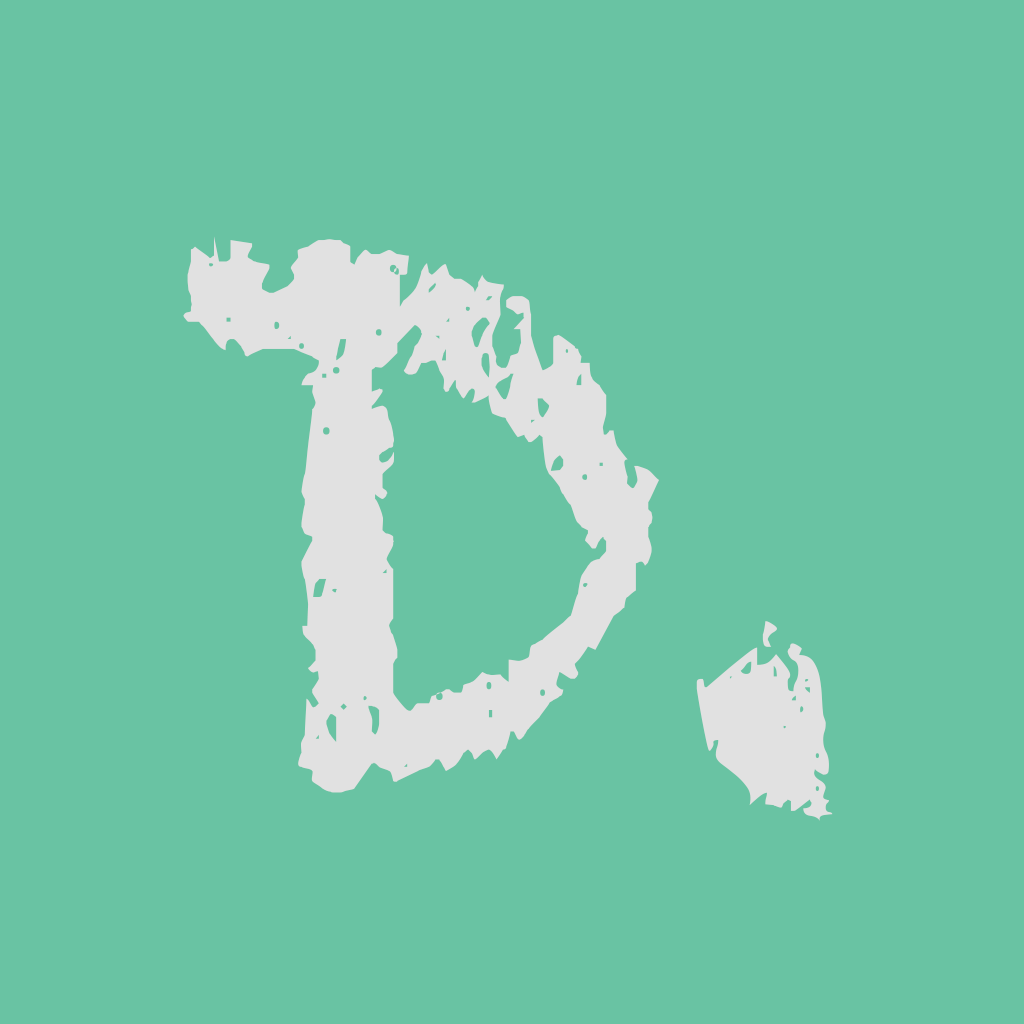
<style>
.page{position:relative;width:1024px;height:1024px;background:#69c3a3}
.page>*{position:absolute;margin:0}
.t1{font:746px "Chalkduster";color:#e1e1e1}
</style>
<div class="page">
<p class="t1" style="left:183px;top:236px;width:650px;height:585px">D.</p>
</div>
